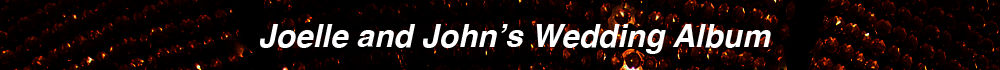
<style>
.page{position:relative;width:1000px;height:70px;background:#000000}
.page>*{position:absolute;margin:0}
.t1{font:31.6px "Helvetica-BoldOblique";color:#ffffff}
</style>
<div class="page">
<p class="t1" style="left:260px;top:24px;width:511px;height:30px">Joelle and John’s Wedding Album</p>
</div>
